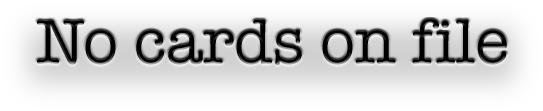
<style>
.page{position:relative;width:543px;height:111px}
.page>*{position:absolute;margin:0}
.t1{font:64px "AmericanTypewriter";color:#000000}
</style>
<div class="page">
<p class="t1" style="left:37px;top:19px;width:470px;height:46px">No cards on file</p>
</div>
